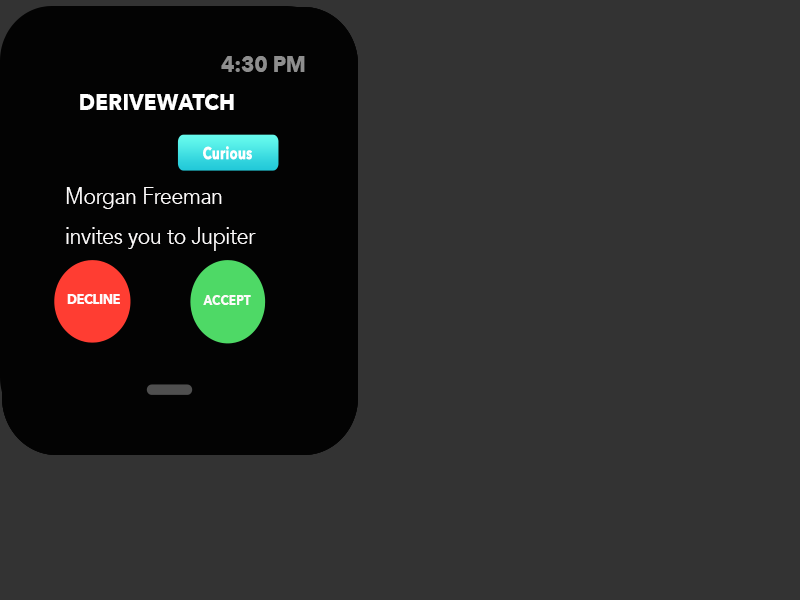
<style>
.page{position:relative;width:800px;height:600px;background:#333333}
.page>*{position:absolute;margin:0}
.t1{font:22.7px "AvenirNext-Bold";letter-spacing:-0.02em;color:#8e8e8e;text-transform:uppercase;scale:0.94 1}
.t2{font:22.7px "AvenirNext-Bold";color:#ffffff;text-transform:uppercase;scale:0.94 1}
.t3{font:17px "AvenirNext-Bold";letter-spacing:0.02em;color:#ffffff;scale:0.76 1}
.t4{font:22.7px/20.2px "Avenir-Book";letter-spacing:-0.02em;color:#fdfbfb;scale:0.94 1}
.t5{font:13.8px "AvenirNext-Bold";letter-spacing:-0.02em;color:#fefbfb;text-transform:uppercase;scale:0.92 1}
.t6{font:13.9px "AvenirNext-Bold";letter-spacing:-0.02em;color:#fefbfb;text-transform:uppercase;scale:0.9 1}
</style>
<div class="page">
<p class="t1" style="left:221px;top:56px;width:84px;height:16px">4:30 PM</p>
<p class="t2" style="left:80px;top:94px;width:154px;height:16px">DEriveWatch</p>
<p class="t3" style="left:203px;top:146px;width:49px;height:14px">Curious</p>
<p class="t4" style="left:66px;top:187px;width:190px;height:64px">Morgan Freeman <br><br>invites you to Jupiter</p>
<p class="t5" style="left:67px;top:294px;width:53px;height:10px">DECLINE</p>
<p class="t6" style="left:203px;top:295px;width:48px;height:10px">Accept</p>
</div>
